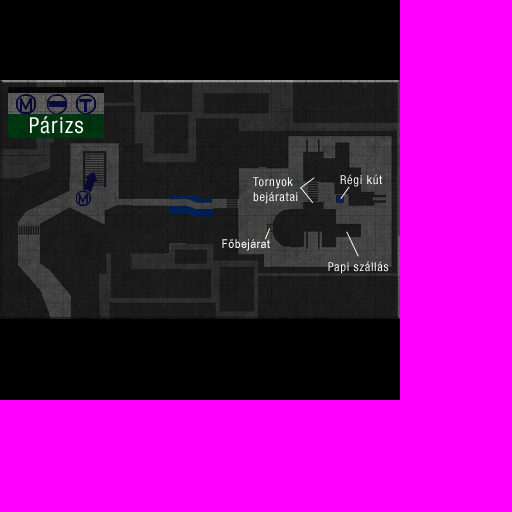
<style>
.page{position:relative;width:512px;height:512px;background:#ff00ff}
.page>*{position:absolute;margin:0}
.t1{font:22.2px "HelveticaNeueLTStd-Cn";letter-spacing:0.055em;color:#ffffff}
.t2{font:12.3px "HelveticaNeueLTStd-Cn";letter-spacing:0.055em;color:#ffffff}
.t3{font:12.3px "ArialNarrow";letter-spacing:0.055em;color:#ffffff}
</style>
<div class="page">
<p class="t1" style="left:30px;top:116px;width:53px;height:18px">Párizs</p>
<p class="t2" style="left:340px;top:174px;width:43px;height:13px">Régi kút</p>
<p class="t2" style="left:253px;top:177px;width:45px;height:27px">Tornyok<br>bejáratai</p>
<p class="t3" style="left:222px;top:239px;width:48px;height:12px">Főbejárat</p>
<p class="t2" style="left:328px;top:261px;width:61px;height:13px">Papi szállás</p>
</div>
